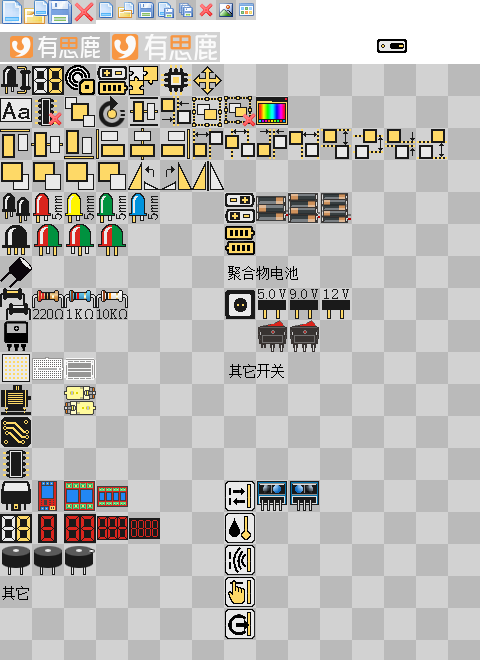
<style>
.page{position:relative;width:480px;height:660px;background:#d2d2d2}
.page>*{position:absolute;margin:0}
.t1{font:24px "SimHei";color:#1a1a1a;scale:1.2 1}
.t2{font:14.7px "SimSun";letter-spacing:-0.05em;color:#000000}
.t3{font:14.7px "SimSun";letter-spacing:-0.05em;color:#1a1a1a}
.t4{font:8px "SimSun";letter-spacing:-0.05em;color:#1a1a1a}
</style>
<div class="page">
<p class="t1" style="left:2px;top:102px;width:28px;height:17px">Aa</p>
<p class="t2" style="left:228px;top:266px;width:70px;height:14px">聚合物电池</p>
<p class="t3" style="left:258px;top:289px;width:28px;height:10px">5<span class="t4">.</span>0 V</p>
<p class="t3" style="left:290px;top:289px;width:28px;height:10px">9<span class="t4">.</span>0 V</p>
<p class="t3" style="left:324px;top:289px;width:25px;height:10px">12 V</p>
<p class="t2" style="left:229px;top:364px;width:55px;height:14px">其它开关</p>
<p class="t2" style="left:2px;top:586px;width:27px;height:14px">其它</p>
</div>
